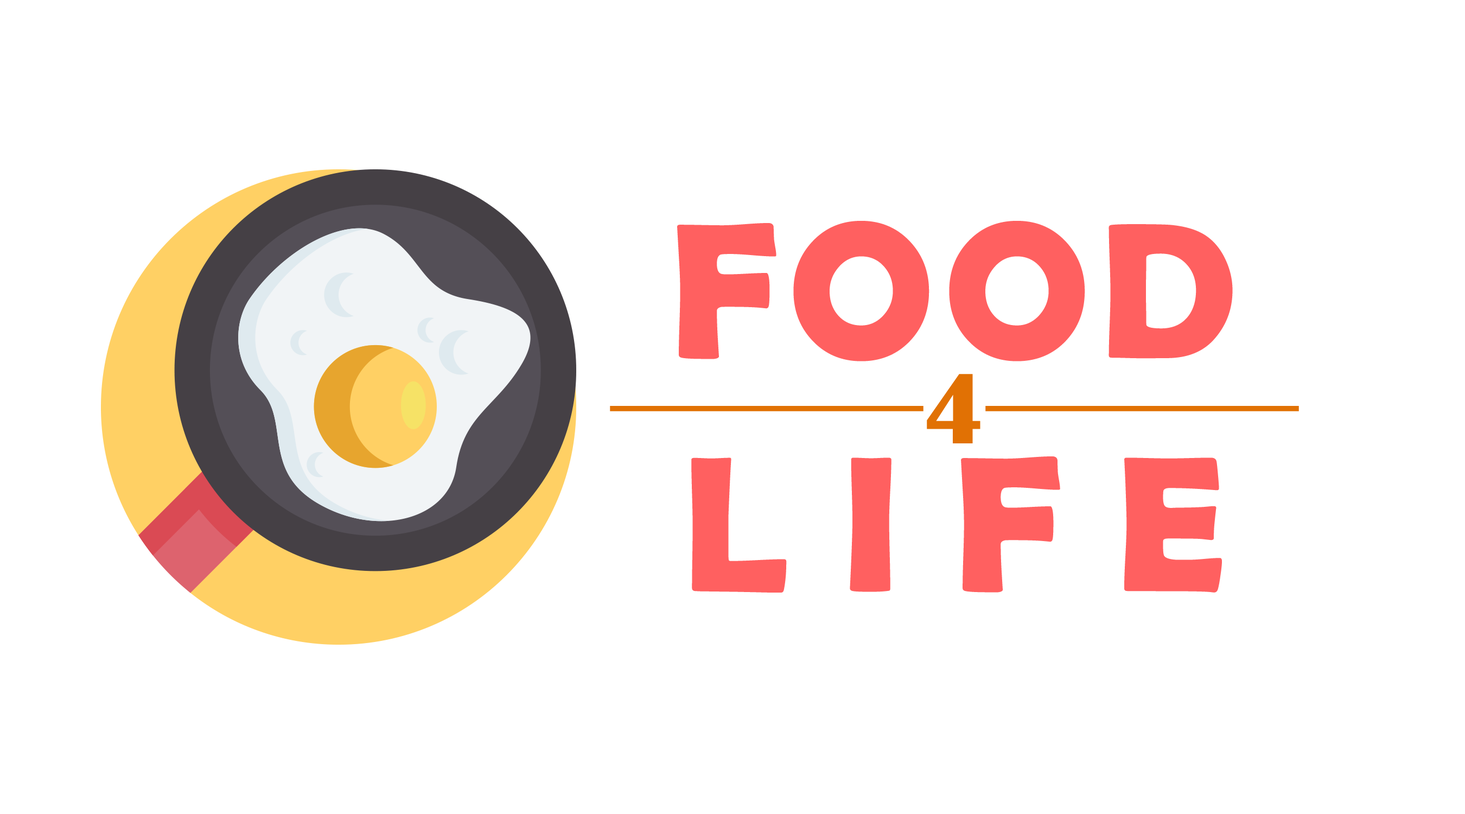
<style>
.page{position:relative;width:1465px;height:814px;background:#ffffff}
.page>*{position:absolute;margin:0}
.t1{font:194.4px "BerlinSansFBDemi-Bold";letter-spacing:0.05em;color:#ff6060}
.t2{font:194.4px "BerlinSansFBDemi-Bold";letter-spacing:0.275em;color:#ff6060}
.t3{font:104px "Rockwell-ExtraBold";color:#e17104}
.t4{font:104px "BritannicBold";color:#e17104}
</style>
<div class="page">
<p class="t1" style="left:677px;top:221px;width:556px;height:372px;text-align:center">FOOD<br><span class="t2">LIFE</span></p>
<p class="t3" style="left:610px;top:374px;width:689px;height:69px">______<span class="t4">4</span>______</p>
</div>
